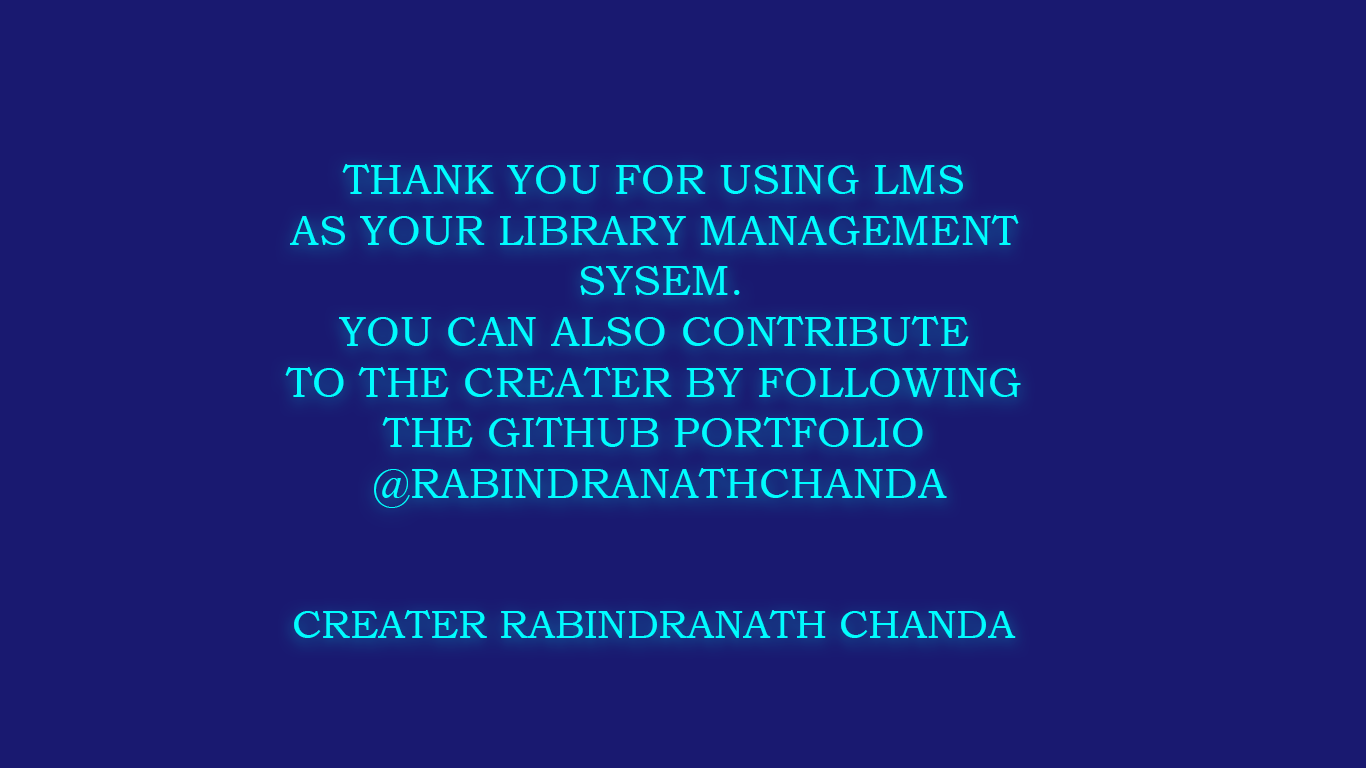
<style>
.page{position:relative;width:1366px;height:768px;background:#191970}
.page>*{position:absolute;margin:0}
.t1{font:42.3px "BookmanOldStyle";color:#00fcff;text-transform:uppercase}
.t2{font:39.6px "BookmanOldStyle";color:#00fcff;text-transform:uppercase}
</style>
<div class="page">
<p class="t1" style="left:285px;top:164px;width:736px;height:344px;text-align:center">Thank you For Using LMS <br>As your Library Management <br>Sysem.<br>You can also contribute <br>to the creater by following <br>the github Portfolio <br>@RabindranathChanda</p>
<p class="t2" style="left:294px;top:610px;width:722px;height:28px">Creater Rabindranath Chanda</p>
</div>
